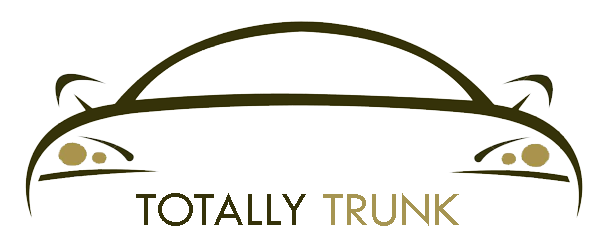
<style>
.page{position:relative;width:600px;height:250px;background:#ffffff}
.page>*{position:absolute;margin:0}
.t1{font:50px "TwCenMT-Regular";color:#353209}
.t2{font:50px "TwCenMT-Regular";color:#a69552}
</style>
<div class="page">
<p class="t1" style="left:136px;top:193px;width:323px;height:33px">TOTALLY <span class="t2">TRUNK</span></p>
</div>
